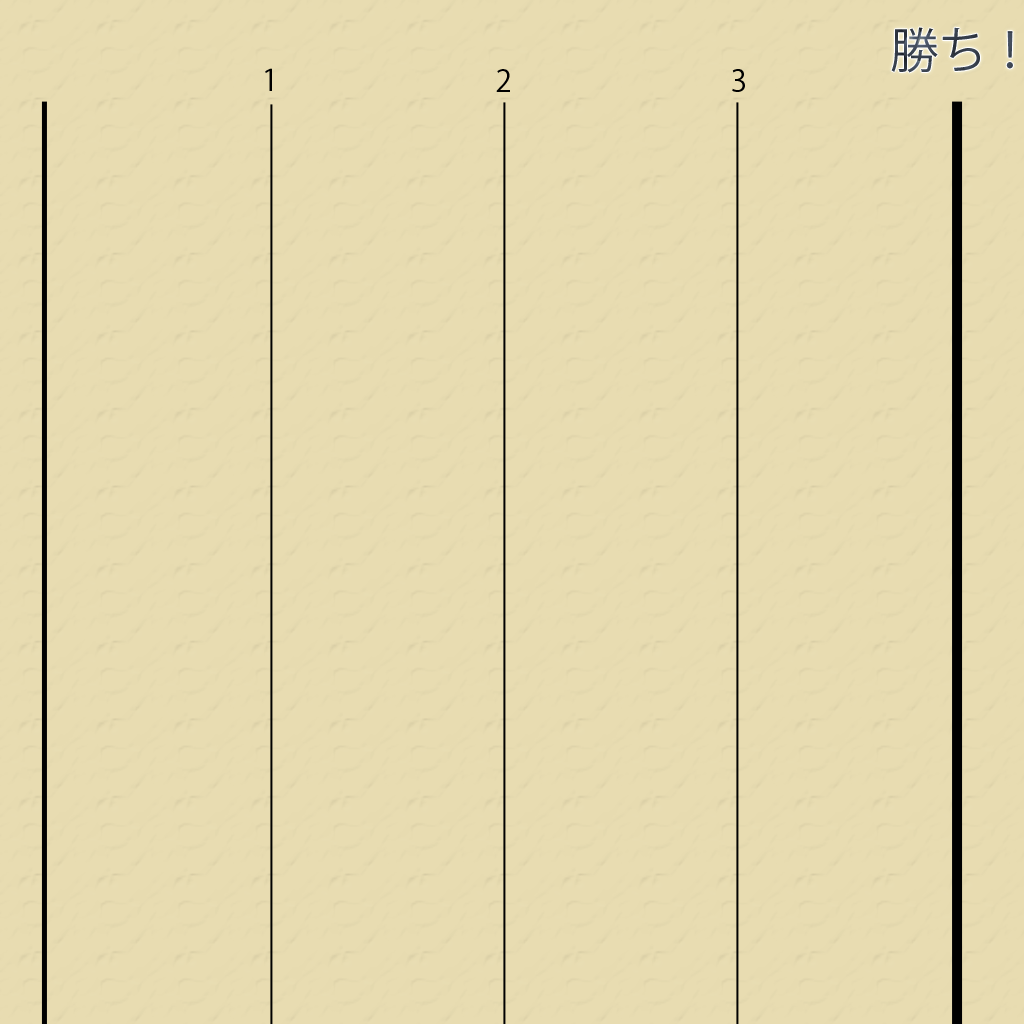
<style>
.page{position:relative;width:1024px;height:1024px;background:#e8dcb1}
.page>*{position:absolute;margin:0}
.t1{font:48px "KozGoPro-Regular";color:#39414e}
.t2{font:30px "KozGoPro-Regular";color:#000000}
</style>
<div class="page">
<p class="t1" style="left:891px;top:27px;width:122px;height:46px">勝ち！</p>
<p class="t2" style="left:265px;top:68px;width:7px;height:23px">1</p>
<p class="t2" style="left:496px;top:69px;width:14px;height:23px">2</p>
<p class="t2" style="left:732px;top:69px;width:13px;height:23px">3</p>
</div>
